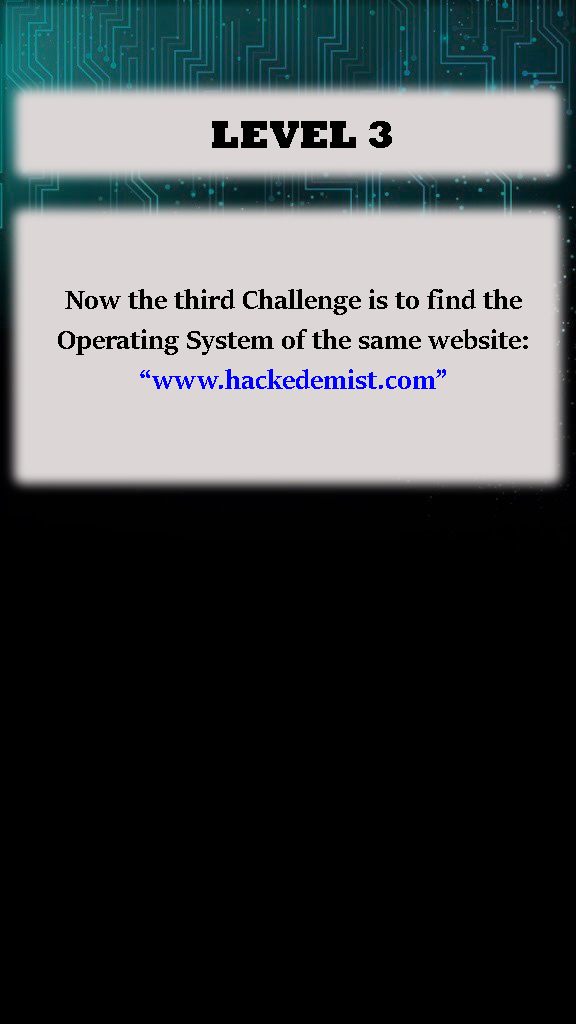
<style>
.page{position:relative;width:576px;height:1024px;background:#000000}
.page>*{position:absolute;margin:0}
.t1{font:40px "Rockwell-ExtraBold";color:#000000}
.t2{font:30px/10px "SitkaBanner-Bold";color:#000000}
.t3{font:30px/10px "SitkaBanner-Bold";color:#0000ff}
</style>
<div class="page">
<p class="t1" style="left:212px;top:121px;width:180px;height:27px">LEVEL 3</p>
<p class="t2" style="left:58px;top:289px;width:470px;height:100px;text-align:center">Now the third Challenge is to find the<br><br><br><br>Operating System of the same website:<br><br><br><br><span class="t3">“www.hackedemist.com”</span></p>
</div>
